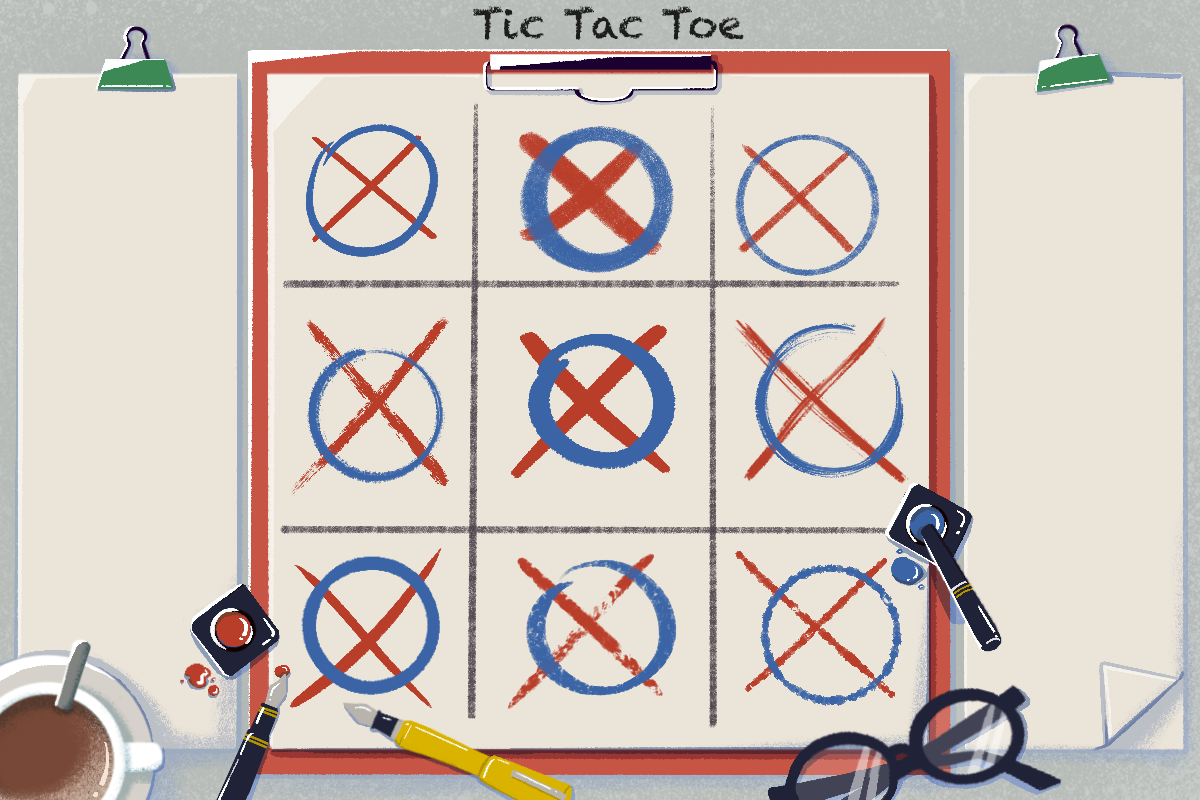
<style>
.page{position:relative;width:1200px;height:800px;background:#ebe4d8}
.page>*{position:absolute;margin:0}
.t1{font:41.6px "Chalkduster";color:#1d1e1c}
</style>
<div class="page">
<p class="t1" style="left:473px;top:6px;width:271px;height:35px">Tic Tac Toe</p>
</div>
